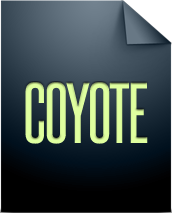
<style>
.page{position:relative;width:172px;height:213px}
.page>*{position:absolute;margin:0}
.t1{font:73px "SteelfishRg-Regular";letter-spacing:-0.02em;color:#dfff9f}
</style>
<div class="page">
<p class="t1" style="left:25px;top:82px;width:123px;height:62px">COYOTE</p>
</div>
